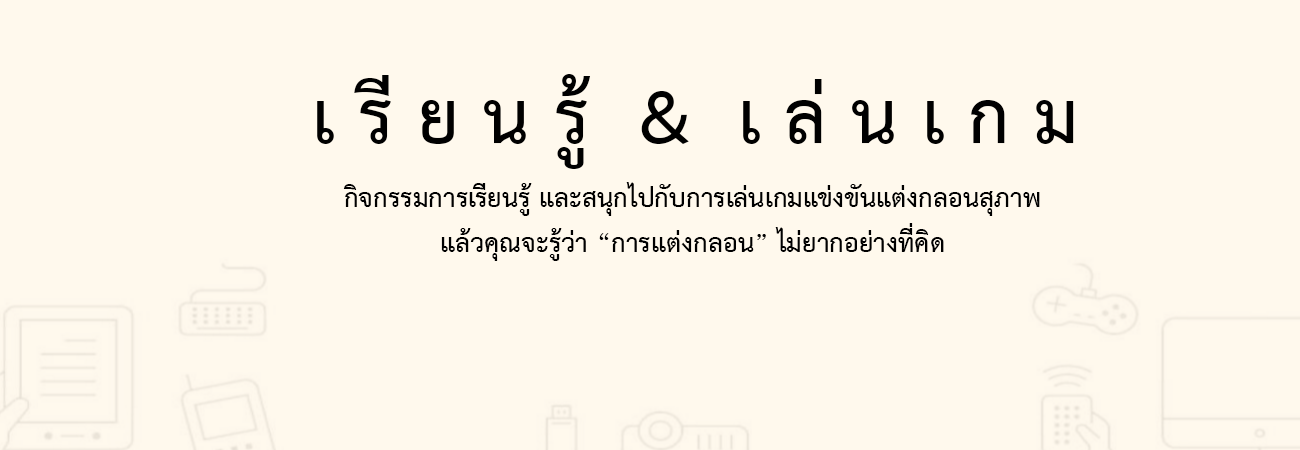
<style>
.page{position:relative;width:1300px;height:450px;background:#fff9ed}
.page>*{position:absolute;margin:0}
.t1{font:104.8px "THSarabunNew-Bold";color:#000000}
.t2{font:37.4px "THSarabunNew-Bold";color:#000000}
</style>
<div class="page">
<p class="t1" style="left:317px;top:74px;width:757px;height:95px">เ รี ย น รู้  &amp;  เ ล่ น เ ก ม</p>
<p class="t2" style="left:343px;top:182px;width:697px;height:79px;text-align:center">กิจกรรมการเรียนรู้ และสนุกไปกับการเล่นเกมแข่งขันแต่งกลอนสุภาพ<br>แล้วคุณจะรู้ว่า “การแต่งกลอน” ไม่ยากอย่างที่คิด</p>
</div>
